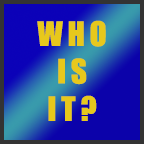
<style>
.page{position:relative;width:144px;height:144px}
.page>*{position:absolute;margin:0}
.t1{font:31.2px "Impact";letter-spacing:0.15em;color:#e7c81c}
</style>
<div class="page">
<p class="t1" style="left:37px;top:20px;width:69px;height:101px;text-align:center">WHO<br>IS<br>IT?</p>
</div>
